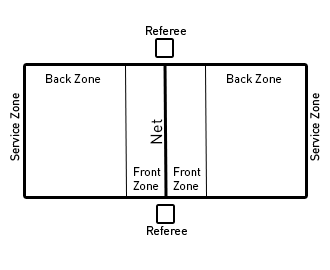
<style>
.page{position:relative;width:330px;height:270px;background:#ffffff}
.page>*{position:absolute;margin:0}
.t1{font:12px "DINPro-Regular";color:#000000}
.t2{font:16px "DINPro-Regular";color:#000000}
</style>
<div class="page">
<p class="t1" style="left:146px;top:26px;width:40px;height:9px">Referee</p>
<p class="t1" style="left:46px;top:74px;width:55px;height:9px">Back Zone</p>
<p class="t1" style="left:227px;top:74px;width:55px;height:9px">Back Zone</p>
<p class="t1" style="left:10px;top:93px;width:10px;height:68px;rotate:-90deg">Service Zone</p>
<p class="t1" style="left:310px;top:93px;width:10px;height:68px;rotate:-90deg">Service Zone</p>
<p class="t2" style="left:150px;top:119px;width:13px;height:25px;rotate:-90deg">Net</p>
<p class="t1" style="left:133px;top:167px;width:28px;height:23px">Front<br>Zone</p>
<p class="t1" style="left:173px;top:167px;width:28px;height:23px">Front<br>Zone</p>
<p class="t1" style="left:147px;top:226px;width:40px;height:9px">Referee</p>
</div>
